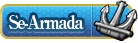
<style>
.page{position:relative;width:138px;height:43px}
.page>*{position:absolute;margin:0}
.t1{font:18px "RyuminPro-ExBold";letter-spacing:-0.08em;color:#fffef9;scale:0.9 1}
</style>
<div class="page">
<p class="t1" style="left:9px;top:15px;width:75px;height:14px">Se-Armada</p>
</div>
